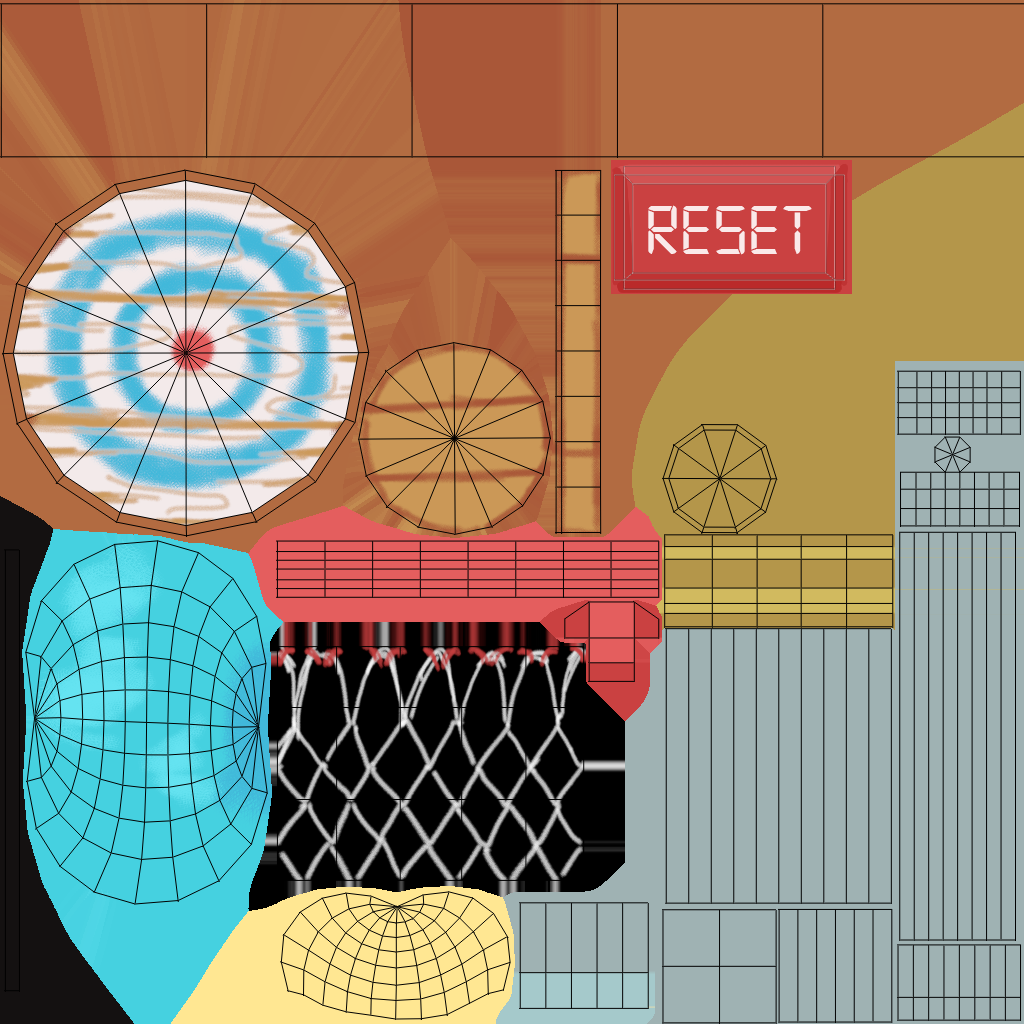
<style>
.page{position:relative;width:1024px;height:1024px}
.page>*{position:absolute;margin:0}
.t1{font:74px "Digital-7";color:#fae9e9}
</style>
<div class="page">
<p class="t1" style="left:648px;top:205px;width:164px;height:50px">RESET</p>
</div>
